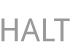
<style>
.page{position:relative;width:70px;height:55px;background:#ffffff}
.page>*{position:absolute;margin:0}
.t1{font:31.8px "DroidSans";color:#999999}
</style>
<div class="page">
<p class="t1" style="left:1px;top:18px;width:69px;height:24px">HALT</p>
</div>
